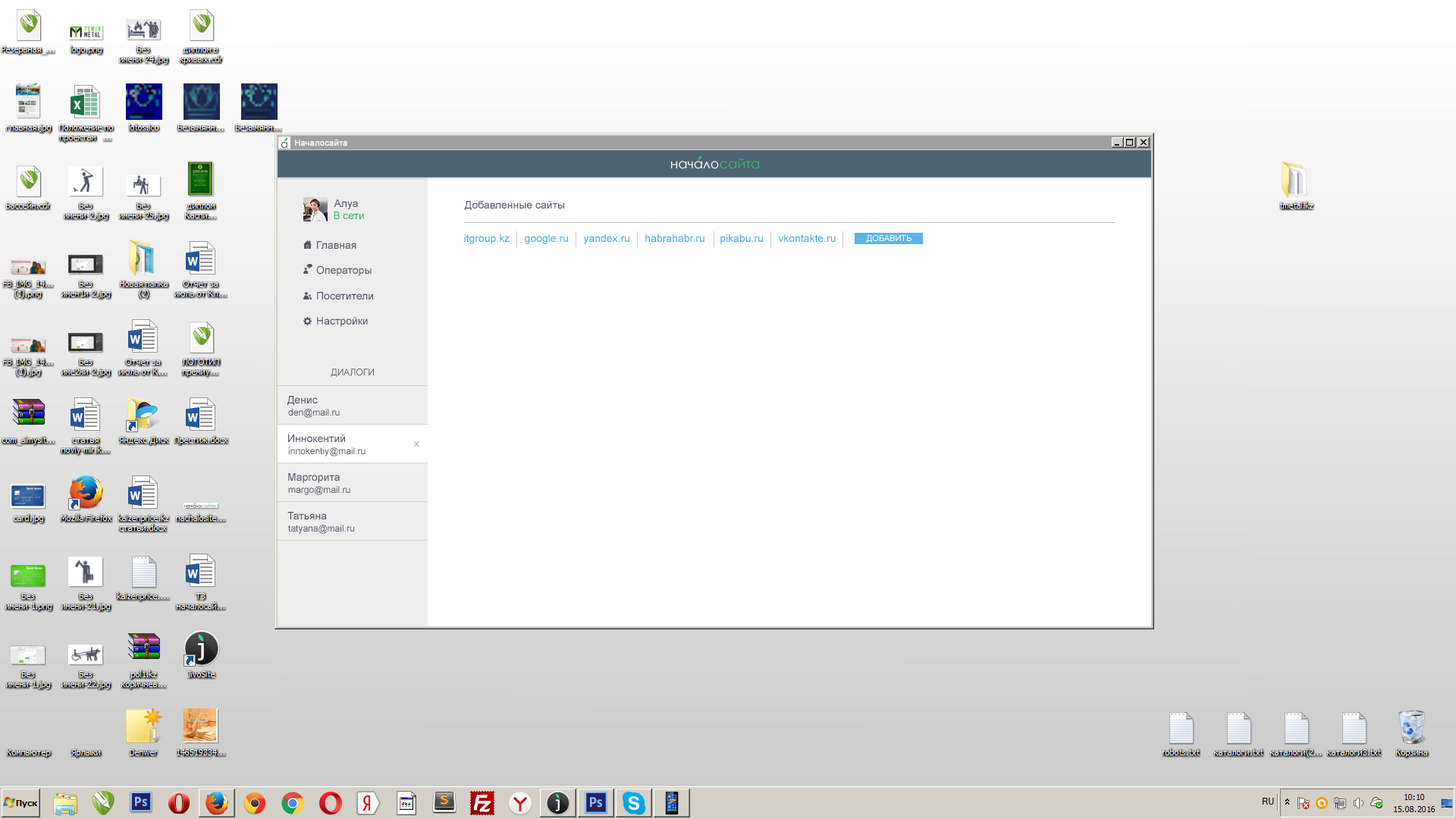
<style>
.page{position:relative;width:1456px;height:819px;background:#ffffff}
.page>*{position:absolute;margin:0}
.t1{font:10.9px "CenturyGothic";color:#3f414d;scale:0.95 1}
.t2{font:8.3px "ArialMT";color:#ffffff;font-weight:bold}
.t3{font:13.3px "CenturyGothic";color:#ffffff}
.t4{font:13.3px "CenturyGothic";color:#34ba65}
.t5{font:10.6px "ArialMT";color:#515567}
.t6{font:10.6px "ArialMT";color:#34ba65}
.t7{font:10.6px "ArialMT";color:#4aa9df}
.t8{font:10.6px "ArialMT";color:#4ba9df}
.t9{font:8.3px "ArialMT";color:#ffffff}
.t10{font:9.1px "ArialMT";color:#515567}
</style>
<div class="page">
<p class="t1" style="left:281px;top:142px;width:6px;height:7px">а</p>
<p class="t2" style="left:295px;top:139px;width:52px;height:7px">Началосайта</p>
<p class="t3" style="left:671px;top:158px;width:88px;height:11px">начало<span class="t4">сайта</span></p>
<p class="t5" style="left:334px;top:199px;width:24px;height:10px">Алуа</p>
<p class="t5" style="left:464px;top:200px;width:100px;height:11px">Добавленные сайты</p>
<p class="t6" style="left:334px;top:212px;width:30px;height:7px">В сети</p>
<p class="t5" style="left:316px;top:241px;width:57px;height:86px">Главная<br><br>Операторы<br><br>Посетители<br><br>Настройки</p>
<p class="t7" style="left:464px;top:234px;width:372px;height:10px"><span class="t8">itgroup.kz     google.ru     yandex.ru </span>    habrahabr.ru     pikabu.ru     vkontakte.ru</p>
<p class="t9" style="left:866px;top:235px;width:46px;height:8px">ДОБАВИТЬ</p>
<p class="t10" style="left:331px;top:369px;width:43px;height:8px">ДИАЛОГИ</p>
<p class="t5" style="left:287px;top:396px;width:31px;height:10px">Денис</p>
<p class="t10" style="left:288px;top:409px;width:52px;height:9px">den@mail.ru</p>
<p class="t5" style="left:288px;top:434px;width:57px;height:8px">Иннокентий</p>
<p class="t10" style="left:288px;top:447px;width:78px;height:10px">innokentiy@mail.ru</p>
<p class="t5" style="left:288px;top:473px;width:52px;height:10px">Маргорита</p>
<p class="t10" style="left:288px;top:486px;width:62px;height:9px">margo@mail.ru</p>
<p class="t5" style="left:287px;top:512px;width:40px;height:7px">Татьяна</p>
<p class="t10" style="left:288px;top:525px;width:66px;height:9px">tatyana@mail.ru</p>
</div>
